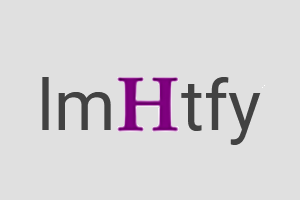
<style>
.page{position:relative;width:300px;height:200px;background:#e0e0e0}
.page>*{position:absolute;margin:0}
.t1{font:70px "Roboto-Regular";color:#424242}
</style>
<div class="page">
<p class="t1" style="left:42px;top:77px;width:69px;height:53px">lm</p>
<p class="t1" style="left:181px;top:77px;width:80px;height:68px">tfy</p>
</div>
